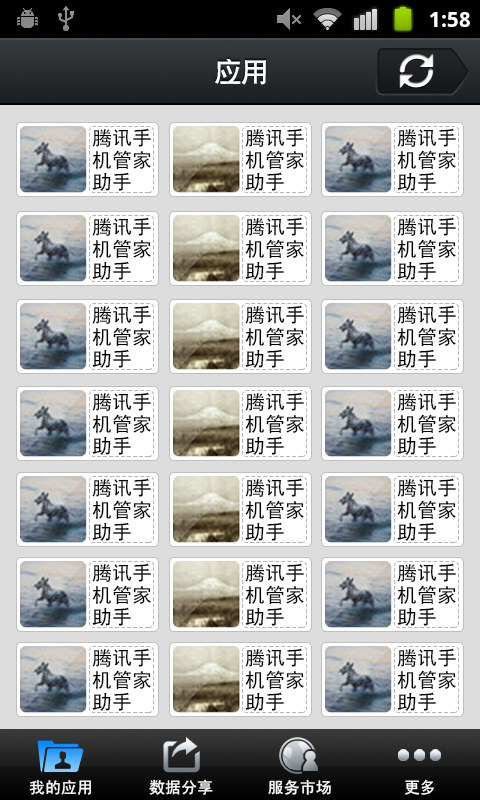
<style>
.page{position:relative;width:480px;height:800px;background:#ffffff}
.page>*{position:absolute;margin:0}
.t1{font:27px "CTCuHeiSJ";color:#ffffff}
.t2{font:20px/22px "SimHei";color:#000000}
.t3{font:16px "SimHei";color:#ffffff}
</style>
<div class="page">
<p class="t1" style="left:215px;top:58px;width:51px;height:27px">应用</p>
<p class="t2" style="left:92px;top:128px;width:59px;height:63px">腾讯手<br>机管家<br>助手</p>
<p class="t2" style="left:245px;top:128px;width:59px;height:63px">腾讯手<br>机管家<br>助手</p>
<p class="t2" style="left:397px;top:128px;width:59px;height:63px">腾讯手<br>机管家<br>助手</p>
<p class="t2" style="left:92px;top:217px;width:59px;height:63px">腾讯手<br>机管家<br>助手</p>
<p class="t2" style="left:245px;top:217px;width:59px;height:63px">腾讯手<br>机管家<br>助手</p>
<p class="t2" style="left:397px;top:217px;width:59px;height:63px">腾讯手<br>机管家<br>助手</p>
<p class="t2" style="left:92px;top:305px;width:59px;height:63px">腾讯手<br>机管家<br>助手</p>
<p class="t2" style="left:245px;top:305px;width:59px;height:63px">腾讯手<br>机管家<br>助手</p>
<p class="t2" style="left:397px;top:305px;width:59px;height:63px">腾讯手<br>机管家<br>助手</p>
<p class="t2" style="left:92px;top:392px;width:59px;height:63px">腾讯手<br>机管家<br>助手</p>
<p class="t2" style="left:245px;top:392px;width:59px;height:63px">腾讯手<br>机管家<br>助手</p>
<p class="t2" style="left:397px;top:392px;width:59px;height:63px">腾讯手<br>机管家<br>助手</p>
<p class="t2" style="left:92px;top:478px;width:59px;height:63px">腾讯手<br>机管家<br>助手</p>
<p class="t2" style="left:245px;top:478px;width:59px;height:63px">腾讯手<br>机管家<br>助手</p>
<p class="t2" style="left:397px;top:478px;width:59px;height:63px">腾讯手<br>机管家<br>助手</p>
<p class="t2" style="left:92px;top:563px;width:59px;height:63px">腾讯手<br>机管家<br>助手</p>
<p class="t2" style="left:245px;top:563px;width:59px;height:63px">腾讯手<br>机管家<br>助手</p>
<p class="t2" style="left:397px;top:563px;width:59px;height:63px">腾讯手<br>机管家<br>助手</p>
<p class="t2" style="left:92px;top:648px;width:59px;height:63px">腾讯手<br>机管家<br>助手</p>
<p class="t2" style="left:245px;top:648px;width:59px;height:63px">腾讯手<br>机管家<br>助手</p>
<p class="t2" style="left:397px;top:648px;width:59px;height:63px">腾讯手<br>机管家<br>助手</p>
<p class="t3" style="left:29px;top:780px;width:62px;height:15px">我的应用</p>
<p class="t3" style="left:149px;top:779px;width:64px;height:16px">数据分享</p>
<p class="t3" style="left:268px;top:779px;width:63px;height:16px">服务市场</p>
<p class="t3" style="left:405px;top:779px;width:29px;height:16px">更多</p>
</div>
